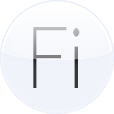
<style>
.page{position:relative;width:114px;height:114px;background:#f0f3fa}
.page>*{position:absolute;margin:0}
.t1{font:85px "PreludeWGL-Light"}
</style>
<div class="page">
<p class="t1" style="left:33px;top:27px;width:47px;height:61px">Fi</p>
</div>
